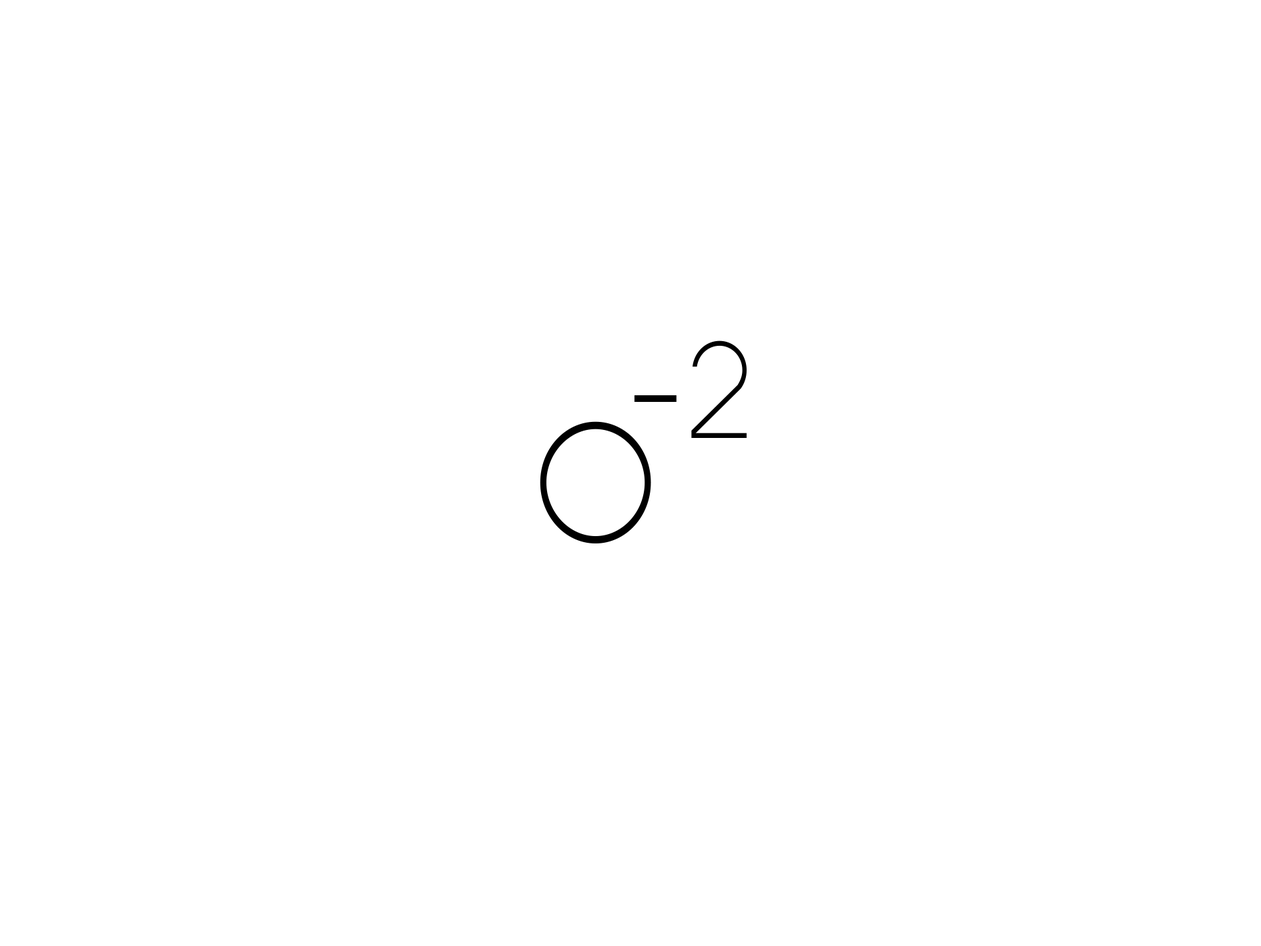
<style>
.page{position:relative;width:1261px;height:946px;background:#ffffff}
.page>*{position:absolute;margin:0}
.t1{font:138.9px "Alcubierre";color:#000000;scale:0.95 1}
.t2{font:162.1px "Alcubierre";color:#000000;scale:0.95 1}
.t3{font:173.6px "Alcubierre";color:#000000;scale:0.95 1}
</style>
<div class="page">
<p class="t1" style="left:691px;top:340px;width:56px;height:98px">2</p>
<p class="t2" style="left:634px;top:395px;width:43px;height:7px">-</p>
<p class="t3" style="left:540px;top:421px;width:111px;height:122px">O</p>
</div>
